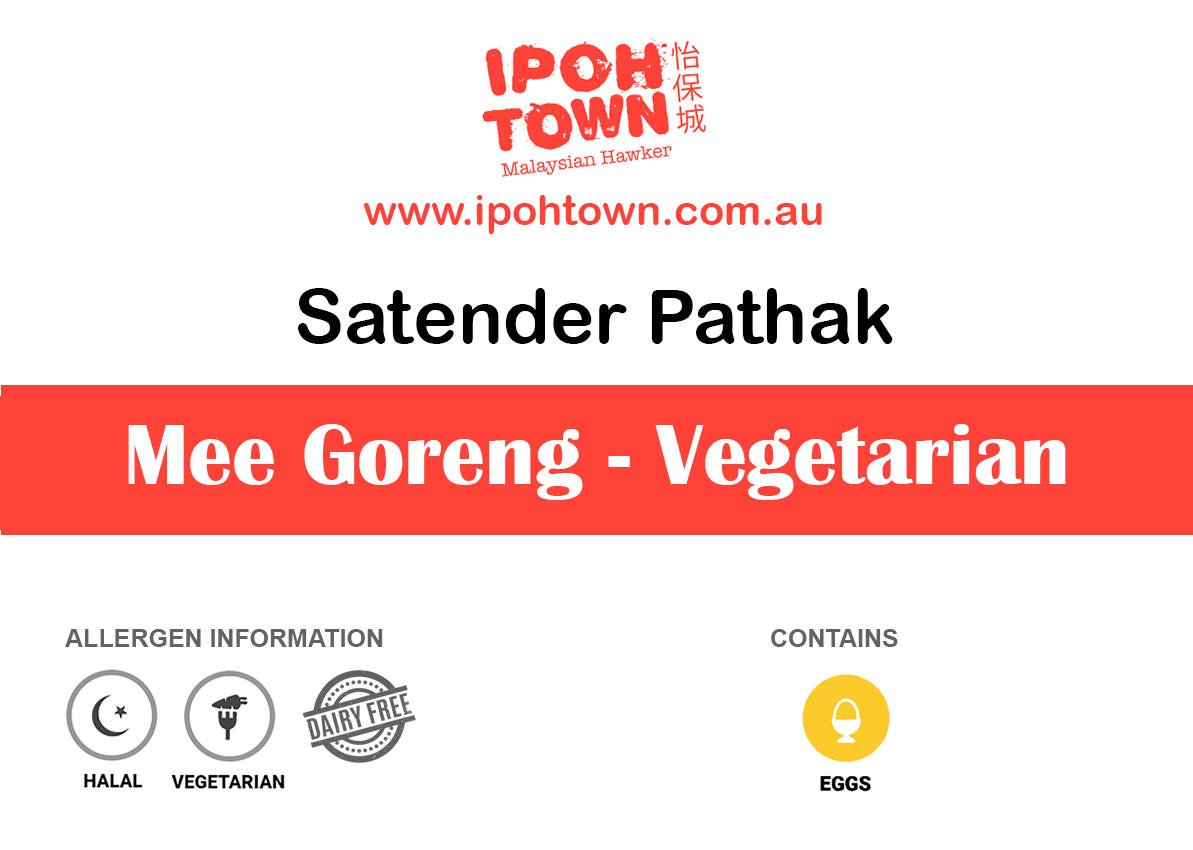
<style>
.page{position:relative;width:1193px;height:850px;background:#ffffff}
.page>*{position:absolute;margin:0}
.t1{font:41.7px "ArialRoundedMTBold";color:#ff4338}
.t2{font:75px "ArialRoundedMTBold";color:#000000}
.t3{font:87.5px "BritannicBold";color:#ffffff}
.t4{font:25px "Arial-BoldMT";color:#636363}
</style>
<div class="page">
<p class="t1" style="left:364px;top:195px;width:458px;height:39px">www.ipohtown.com.au</p>
<p class="t2" style="left:298px;top:288px;width:595px;height:56px">Satender Pathak</p>
<p class="t3" style="left:128px;top:424px;width:938px;height:76px">Mee Goreng - Vegetarian</p>
<p class="t4" style="left:65px;top:629px;width:318px;height:18px">ALLERGEN INFORMATION</p>
<p class="t4" style="left:771px;top:629px;width:127px;height:18px">CONTAINS</p>
</div>
